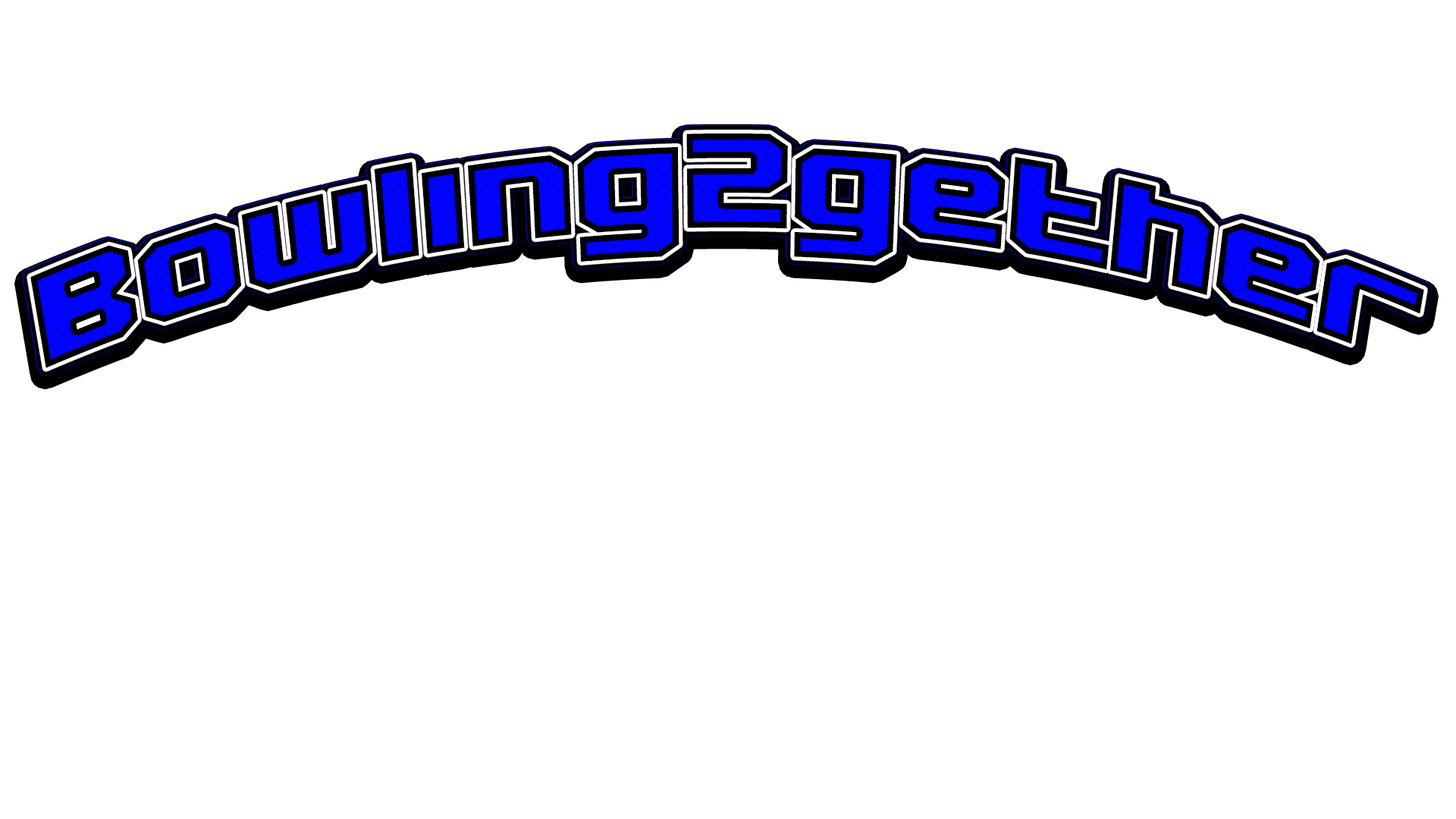
<style>
.page{position:relative;width:1456px;height:819px;background:#ffffff}
.page>*{position:absolute;margin:0}
.t1{font:145.3px "BNMachine"}
.t2{font:145.3px "KimberleyBl-Regular"}
</style>
<div class="page">
<p class="t1" style="left:30px;top:133px;width:1394px;height:236px"><span class="t2"><br></span>Bowling2gether</p>
</div>
